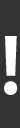
<style>
.page{position:relative;width:20px;height:128px;background:#333333}
.page>*{position:absolute;margin:0}
.t1{font:75px "AdobeGothicStd-Bold";color:#ffffff}
</style>
<div class="page">
<p class="t1" style="left:4px;top:36px;width:14px;height:59px">!</p>
</div>
